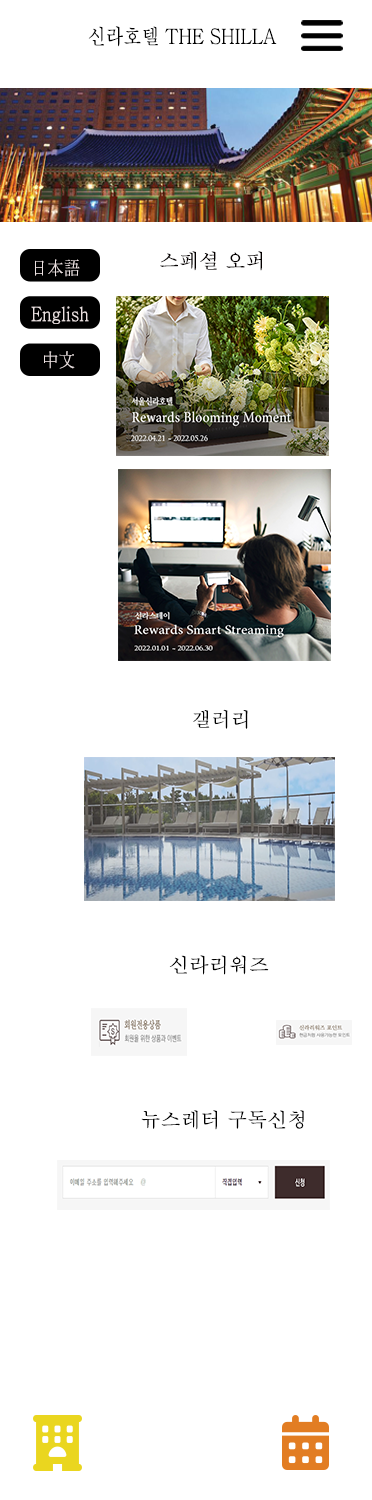
<style>
.page{position:relative;width:372px;height:1500px;background:#ffffff}
.page>*{position:absolute;margin:0}
.t1{font:21.1px "Batang";color:#000000;scale:0.84 1}
.t2{font:20px "Batang";color:#040000}
.t3{font:19.7px "Batang";color:#ebe1e1;scale:0.84 1}
.t4{font:20px "Batang";color:#000000}
</style>
<div class="page">
<p class="t1" style="left:88px;top:26px;width:189px;height:21px">신라호텔 THE SHILLA</p>
<p class="t2" style="left:160px;top:251px;width:102px;height:20px">스페셜 오퍼</p>
<p class="t3" style="left:35px;top:259px;width:45px;height:18px">日本語</p>
<p class="t3" style="left:31px;top:306px;width:58px;height:18px">English</p>
<p class="t3" style="left:44px;top:351px;width:31px;height:18px">中文</p>
<p class="t4" style="left:193px;top:709px;width:55px;height:20px">갤러리</p>
<p class="t4" style="left:169px;top:955px;width:100px;height:20px">신라리워즈</p>
<p class="t4" style="left:141px;top:1110px;width:163px;height:20px">뉴스레터 구독신청</p>
</div>
